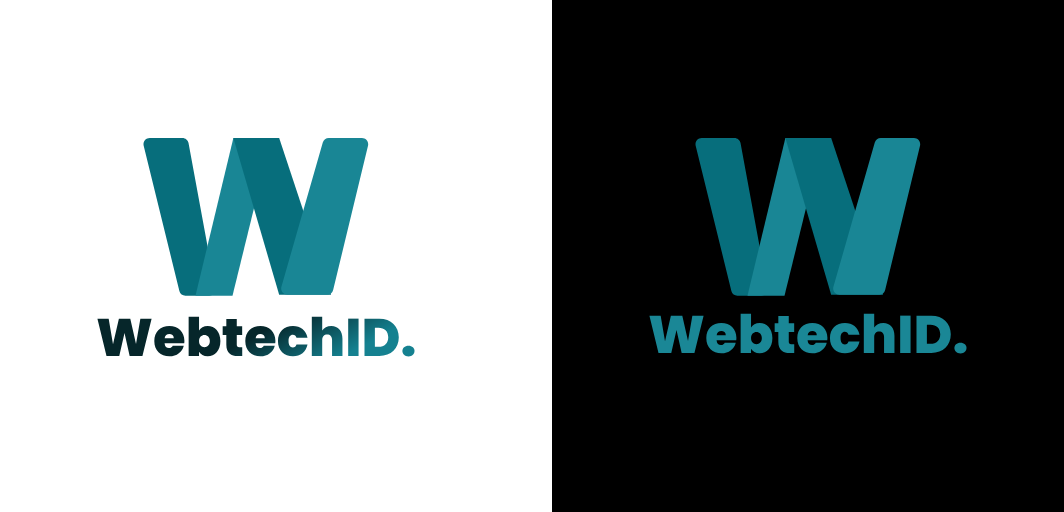
<style>
.page{position:relative;width:1064px;height:512px;background:#ffffff}
.page>*{position:absolute;margin:0}
.t1{font:53px "Poppins-ExtraBold"}
.t2{font:53px "Poppins-ExtraBold";color:#1a8796}
</style>
<div class="page">
<p class="t1" style="left:97px;top:316px;width:318px;height:41px">WebtechID.</p>
<p class="t2" style="left:649px;top:313px;width:318px;height:41px">WebtechID.</p>
</div>
